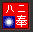
<style>
.page{position:relative;width:33px;height:32px;background:#f20000}
.page>*{position:absolute;margin:0}
.t1{font:10.4px "SimSun";color:#ffffff}
.t2{font:11.7px "SimSun";color:#ffffff}
</style>
<div class="page">
<p class="t1" style="left:6px;top:5px;width:19px;height:8px">八二</p>
<p class="t2" style="left:16px;top:15px;width:11px;height:12px">奉</p>
</div>
